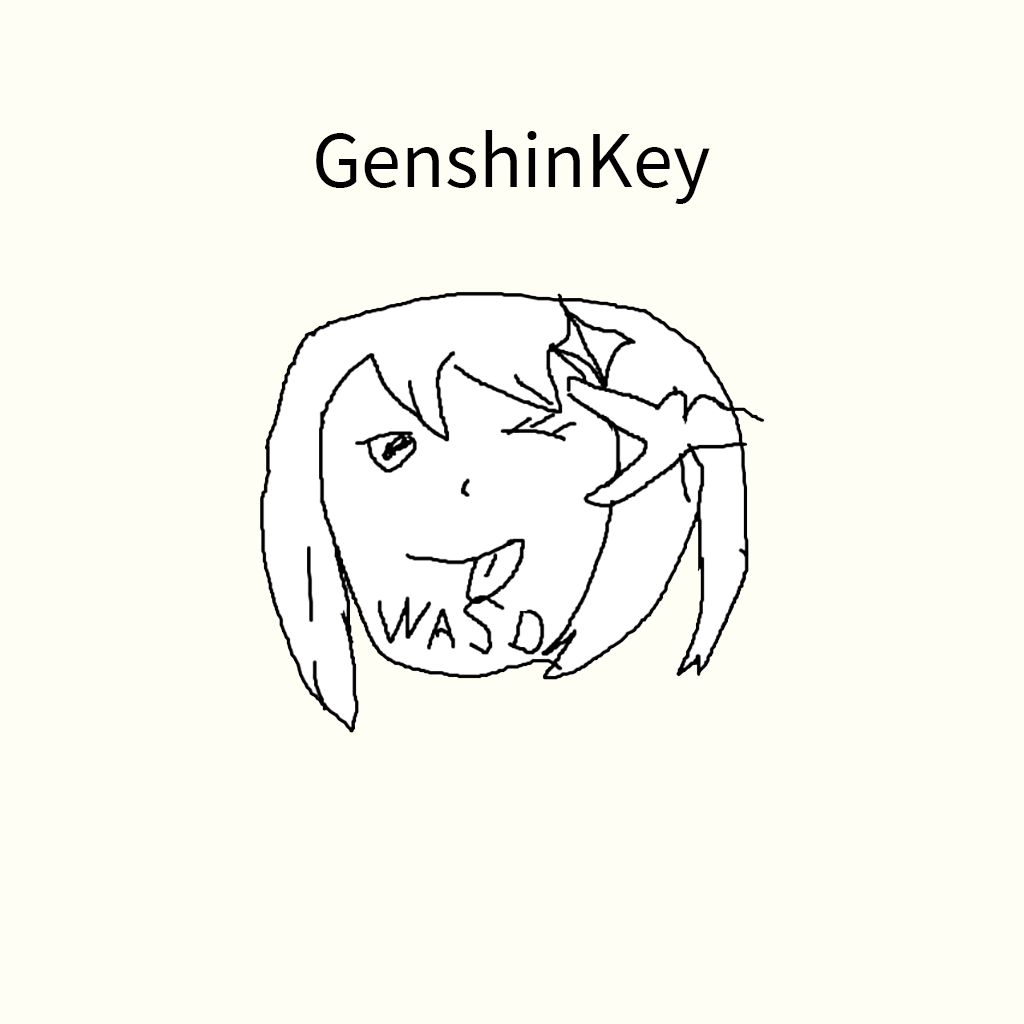
<style>
.page{position:relative;width:1024px;height:1024px;background:#fefef4}
.page>*{position:absolute;margin:0}
.t1{font:72px "TaipeiSansTCBeta-Regular";color:#000000}
</style>
<div class="page">
<p class="t1" style="left:316px;top:130px;width:394px;height:74px">GenshinKey</p>
</div>
